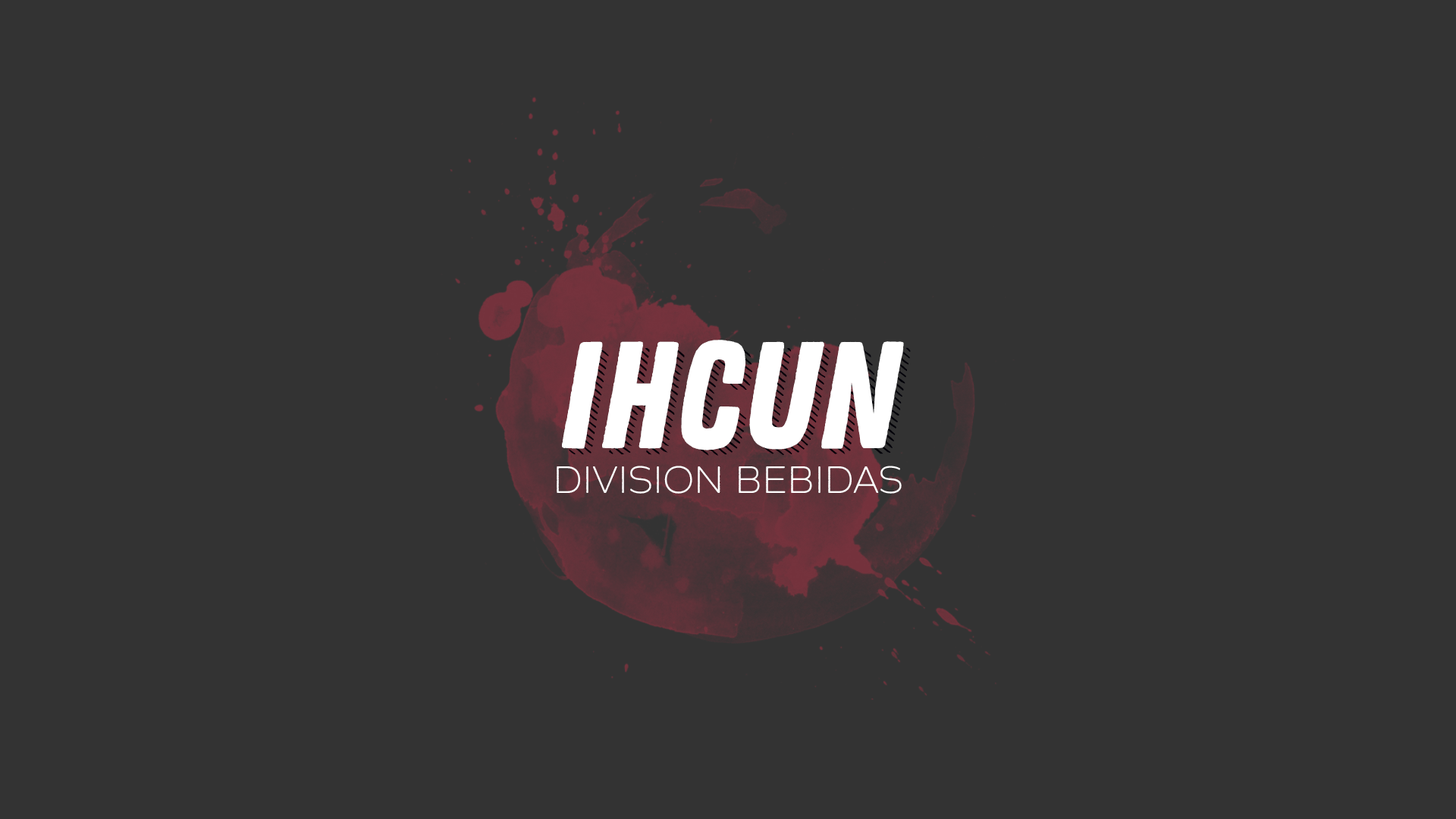
<style>
.page{position:relative;width:1456px;height:819px;background:#333333}
.page>*{position:absolute;margin:0}
.t1{font:151.7px "FONTSPRINGDEMO-ZingRustDemoBaseRegular";color:#ffffff}
.t2{font:37.9px "FONTSPRINGDEMO-ZingSansRustLDemoBaseRegular";color:#fffefe}
</style>
<div class="page">
<p class="t1" style="left:562px;top:340px;width:342px;height:110px">IHCUN</p>
<p class="t2" style="left:557px;top:466px;width:345px;height:28px">DIVISION BEBIDAS</p>
</div>
